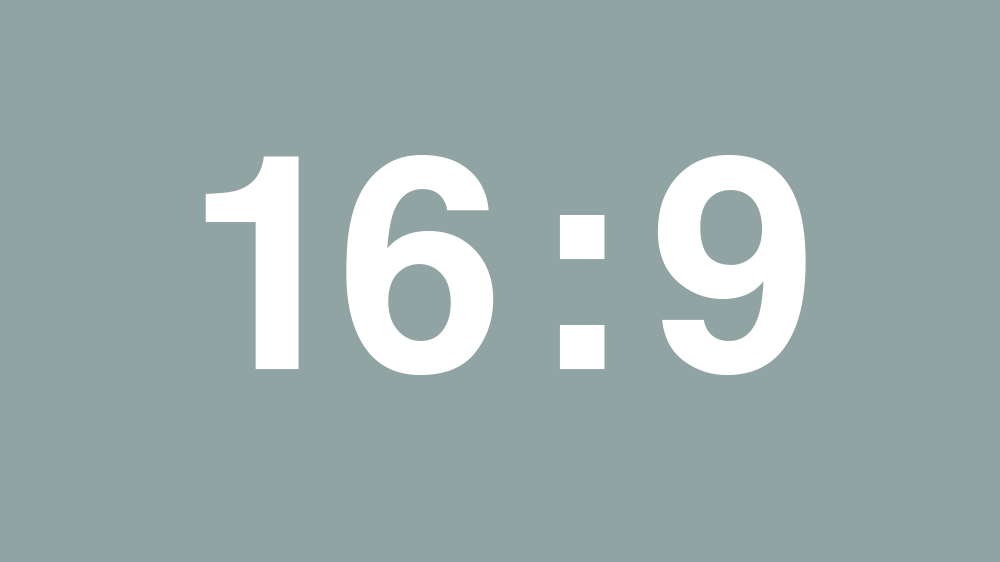
<style>
.page{position:relative;width:1000px;height:562px;background:#90a4a3}
.page>*{position:absolute;margin:0}
.t1{font:300px "Helvetica-Bold";letter-spacing:0.075em;color:#ffffff}
.t2{font:300px "Helvetica-Bold";letter-spacing:-0.05em;color:#ffffff}
</style>
<div class="page">
<p class="t1" style="left:205px;top:155px;width:601px;height:220px"><span class="t2">1</span>6:9</p>
</div>
